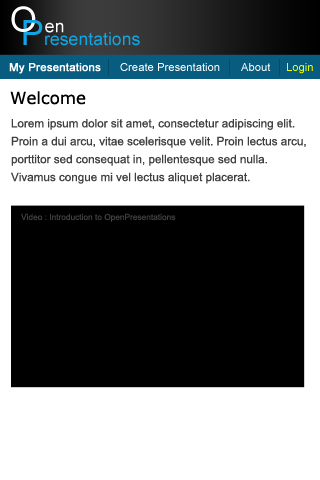
<style>
.page{position:relative;width:320px;height:480px;background:#ffffff}
.page>*{position:absolute;margin:0}
.t1{font:34.7px "ArialMT";color:#ffffff}
.t2{font:17.7px "ArialMT";color:#10a6e4}
.t3{font:34.7px "ArialMT";color:#10a6e4}
.t4{font:17.7px "ArialMT";color:#ffffff}
.t5{font:11.2px "ArialMT";color:#ffffff;font-weight:bold}
.t6{font:11.2px "ArialMT";color:#ffffff}
.t7{font:11.2px "ArialMT";color:#e9fe00}
.t8{font:16.7px "Verdana";color:#000000}
.t9{font:11.7px/17.9px "ArialMT";color:#404040}
.t10{font:8.3px "ArialMT";color:#404040}
</style>
<div class="page">
<p class="t1" style="left:11px;top:6px;width:25px;height:26px">O</p>
<p class="t2" style="left:23px;top:20px;width:117px;height:26px"><span class="t3">P</span>resentations</p>
<p class="t4" style="left:45px;top:22px;width:19px;height:11px">en</p>
<p class="t5" style="left:9px;top:63px;width:92px;height:11px">My Presentations</p>
<p class="t6" style="left:120px;top:63px;width:100px;height:8px">Create Presentation</p>
<p class="t6" style="left:241px;top:63px;width:30px;height:8px">About</p>
<p class="t7" style="left:287px;top:63px;width:26px;height:11px">Login</p>
<p class="t8" style="left:10px;top:91px;width:76px;height:14px">Welcome</p>
<p class="t9" style="left:11px;top:119px;width:295px;height:65px">Lorem ipsum dolor sit amet, consectetur adipiscing elit. Proin a dui arcu, vitae scelerisque velit. Proin lectus arcu, porttitor sed consequat in, pellentesque sed nulla. Vivamus congue mi vel lectus aliquet placerat.</p>
<p class="t10" style="left:21px;top:213px;width:155px;height:9px">Video : Introduction to OpenPresentations</p>
</div>
